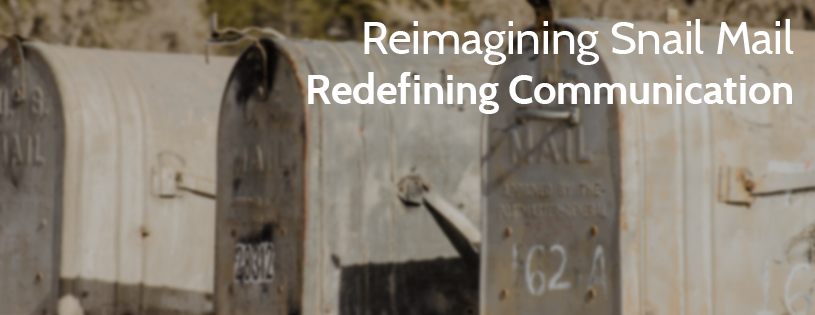
<style>
.page{position:relative;width:815px;height:315px}
.page>*{position:absolute;margin:0}
.t1{font:41.7px "Cabin-Bold";color:#ffffff}
.t2{font:45.8px "Cabin-Regular";color:#ffffff}
</style>
<div class="page">
<p class="t1" style="left:308px;top:19px;width:486px;height:95px;text-align:right"><span class="t2">Reimagining Snail Mail<br></span>Redefining Communication</p>
</div>
